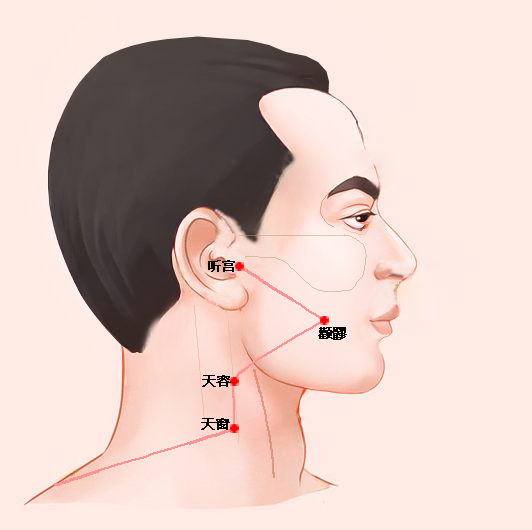
<style>
.page{position:relative;width:532px;height:530px;background:#ffebe4}
.page>*{position:absolute;margin:0}
.t1{font:14px "MicrosoftYaHei";color:#000000;font-weight:bold}
</style>
<div class="page">
<p class="t1" style="left:208px;top:260px;width:27px;height:12px">听宫</p>
<p class="t1" style="left:318px;top:327px;width:29px;height:13px">颧髎</p>
<p class="t1" style="left:202px;top:375px;width:29px;height:12px">天容</p>
<p class="t1" style="left:201px;top:418px;width:29px;height:12px">天窗</p>
</div>
